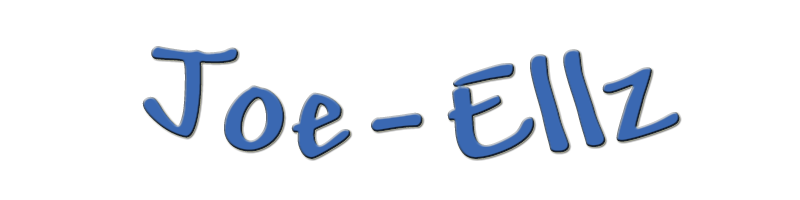
<style>
.page{position:relative;width:800px;height:200px;background:#ffffff}
.page>*{position:absolute;margin:0}
.t1{font:144px "Andy-Bold";color:#3a68b2}
</style>
<div class="page">
<p class="t1" style="left:142px;top:46px;width:538px;height:113px">Joe-Ellz</p>
</div>
